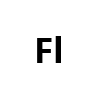
<style>
.page{position:relative;width:100px;height:100px;background:#ffffff}
.page>*{position:absolute;margin:0}
.t1{font:35px "OpenSans-Bold";color:#000000}
</style>
<div class="page">
<p class="t1" style="left:37px;top:36px;width:24px;height:27px">Fl</p>
</div>
